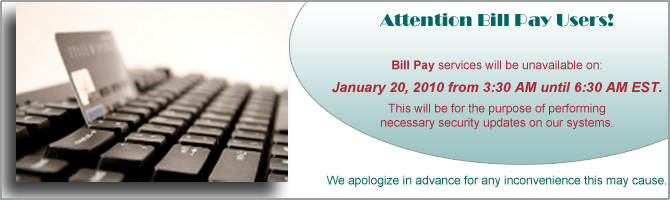
<style>
.page{position:relative;width:670px;height:200px}
.page>*{position:absolute;margin:0}
.t1{font:12px "ArialMT";color:#a82c38}
.t2{font:18px "Broadway";color:#006665}
.t3{font:12px "Arial-BoldMT";color:#a82c38}
.t4{font:14px "Arial-BoldItalicMT";color:#a82c38}
.t5{font:12px "ArialMT";color:#006665}
</style>
<div class="page">
<p class="t1" style="left:326px;top:13px;width:340px;height:174px;text-align:center"><span class="t2">Attention Bill Pay Users! <br><br><br></span><span class="t3">Bill Pay</span> services will be unavailable on:<br><br><span class="t4">January 20, 2010 from 3:30 AM until 6:30 AM EST. <br> <br></span>This will be for the purpose of performing <br>necessary security updates on our systems.<br><br><br><br><span class="t5">We apologize in advance for any inconvenience this may cause.</span></p>
</div>
